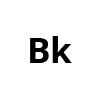
<style>
.page{position:relative;width:100px;height:100px;background:#ffffff}
.page>*{position:absolute;margin:0}
.t1{font:35px "OpenSans-Bold";color:#000000}
</style>
<div class="page">
<p class="t1" style="left:30px;top:36px;width:42px;height:27px">Bk</p>
</div>
